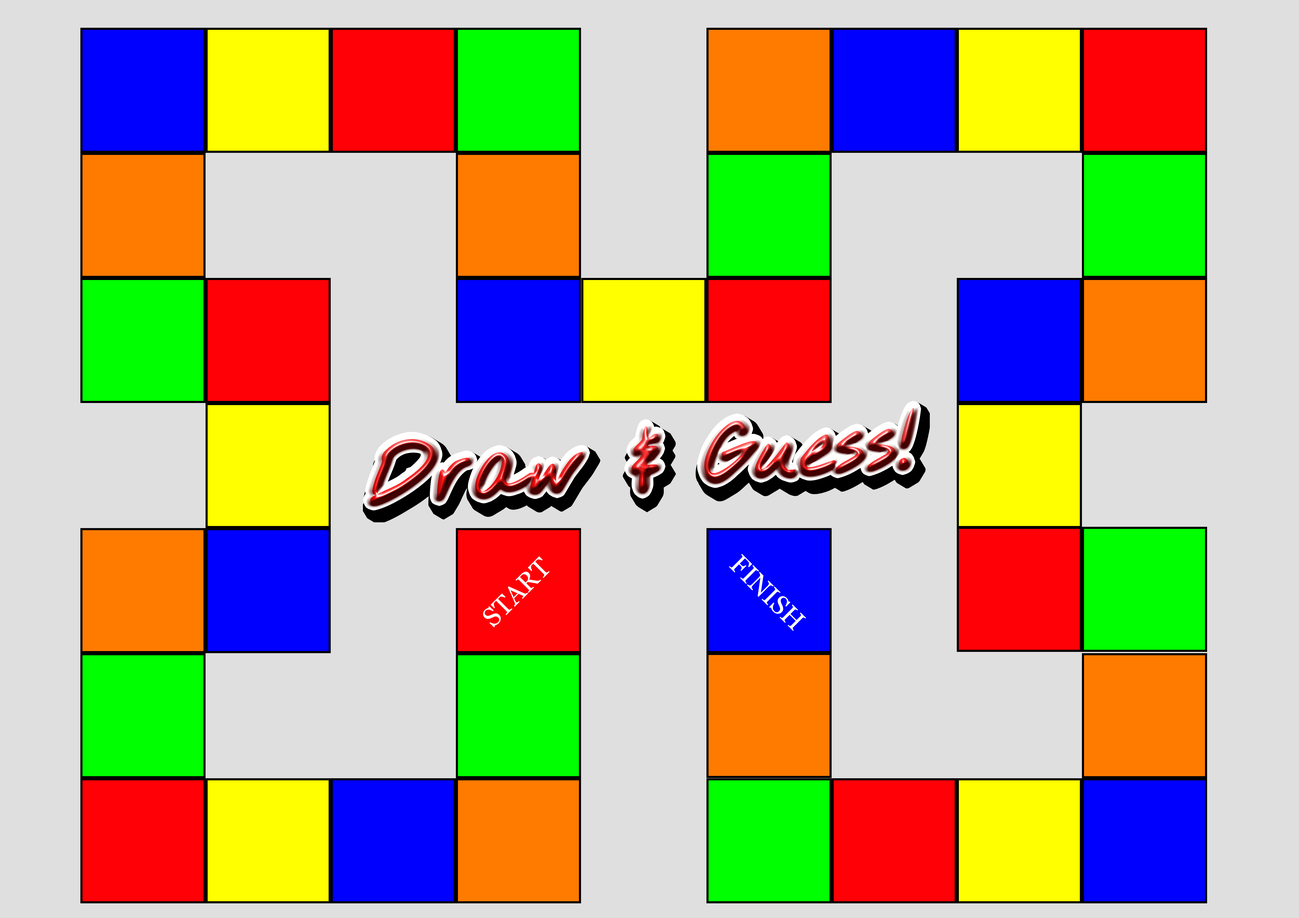
<style>
.page{position:relative;width:1299px;height:918px;background:#dfdfdf}
.page>*{position:absolute;margin:0}
.t1{font:65.5px "NothingYouCouldDoBold"}
.t2{font:26.5px "Georgia";color:#ffffff}
.t3{font:26.4px "Georgia";color:#ffffff}
</style>
<div class="page">
<p class="t1" style="left:370px;top:408px;width:544px;height:95px;rotate:-4deg">Draw &amp; Guess!</p>
<p class="t2" style="left:483px;top:556px;width:66px;height:72px;rotate:-45deg">START</p>
<p class="t3" style="left:729px;top:554px;width:77px;height:77px;rotate:45deg">FINISH</p>
</div>
